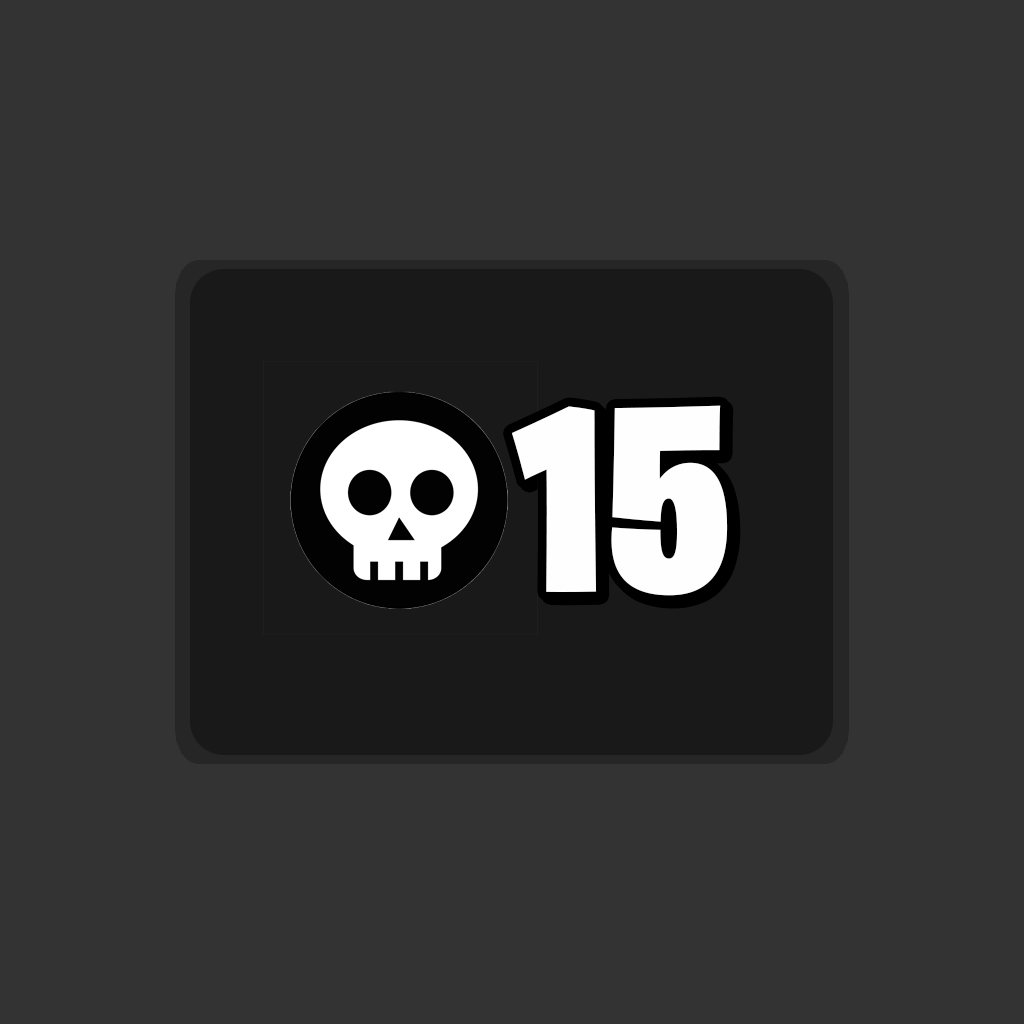
<style>
.page{position:relative;width:1024px;height:1024px;background:#333333}
.page>*{position:absolute;margin:0}
.t1{font:265.9px "BurbankBigCondensed-Black";color:#fefefe}
</style>
<div class="page">
<p class="t1" style="left:512px;top:405px;width:216px;height:191px">15</p>
</div>
